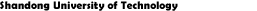
<style>
.page{position:relative;width:257px;height:11px;background:#ffffff}
.page>*{position:absolute;margin:0}
.t1{font:11px "BerlinSansFBDemi-Bold";letter-spacing:0.02em;color:#000000}
</style>
<div class="page">
<p class="t1" style="left:0px;top:1px;width:178px;height:10px">Shandong University of Technology</p>
</div>
